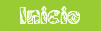
<style>
.page{position:relative;width:101px;height:31px;background:#99cc33}
.page>*{position:absolute;margin:0}
.t1{font:18px "SwirledBRK";color:#ffffff}
</style>
<div class="page">
<p class="t1" style="left:19px;top:6px;width:61px;height:18px">Inicio</p>
</div>
